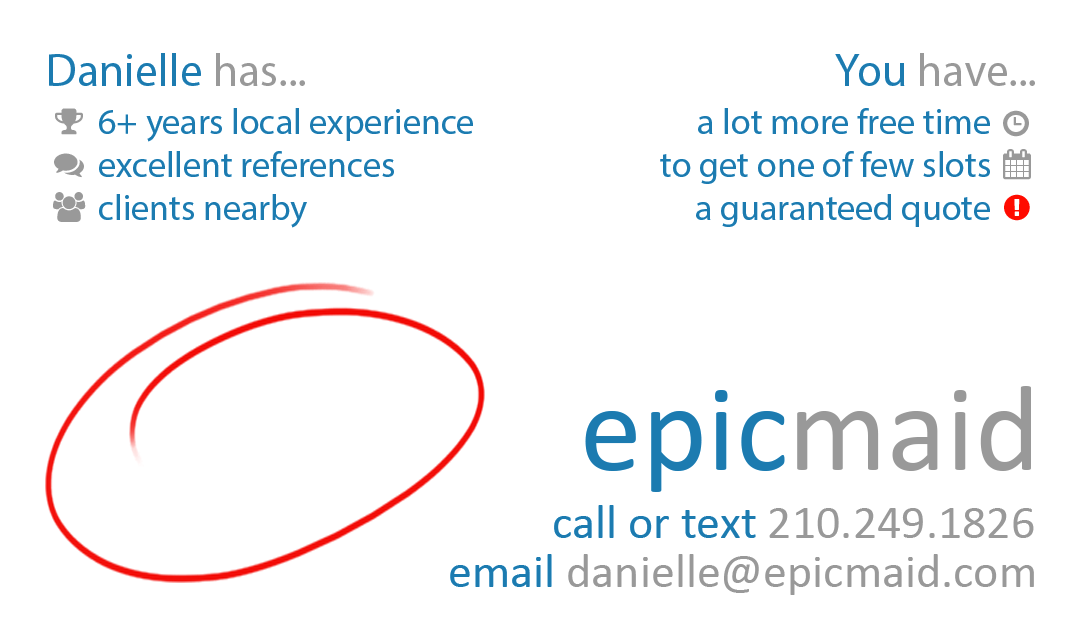
<style>
.page{position:relative;width:1088px;height:638px;background:#ffffff}
.page>*{position:absolute;margin:0}
.t1{font:46px "MyriadPro-Regular";color:#1c7bb0}
.t2{font:46px "MyriadPro-Regular";color:#999999}
.t3{font:36px "MyriadPro-Regular";color:#1c7bb0}
.t4{font:124px "Calibri";color:#1c7bb0}
.t5{font:124px "Calibri";color:#999999}
.t6{font:48px "Calibri";color:#1c7bb0}
.t7{font:48px "Calibri";color:#999999}
</style>
<div class="page">
<p class="t1" style="left:49px;top:53px;width:256px;height:33px">Danielle <span class="t2">has...</span></p>
<p class="t2" style="left:835px;top:53px;width:200px;height:33px"><span class="t1">You </span>have...</p>
<p class="t3" style="left:99px;top:108px;width:374px;height:120px">6+ years local experience<br>excellent references<br>clients nearby</p>
<p class="t3" style="left:660px;top:108px;width:330px;height:119px;text-align:right">a lot more free time<br>to get one of few slots<br>a guaranteed quote</p>
<p class="t4" style="left:585px;top:386px;width:446px;height:106px">epic<span class="t5">maid</span></p>
<p class="t6" style="left:554px;top:505px;width:480px;height:33px">call or text <span class="t7">210.249.1826</span></p>
<p class="t7" style="left:450px;top:554px;width:584px;height:41px"><span class="t6">email </span>danielle@epicmaid.com</p>
</div>
